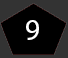
<style>
.page{position:relative;width:68px;height:58px;background:#000000}
.page>*{position:absolute;margin:0}
.t1{font:30px "MyriadPro-Regular";color:#ffffff}
</style>
<div class="page">
<p class="t1" style="left:26px;top:20px;width:13px;height:20px">9</p>
</div>
